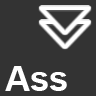
<style>
.page{position:relative;width:96px;height:96px;background:#333333}
.page>*{position:absolute;margin:0}
.t1{font:34.6px "Arial-BoldMT";color:#ffffff}
</style>
<div class="page">
<p class="t1" style="left:5px;top:66px;width:62px;height:25px">Ass</p>
</div>
